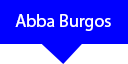
<style>
.page{position:relative;width:128px;height:64px;background:#0000ff}
.page>*{position:absolute;margin:0}
.t1{font:18px "MyriadPro-Regular";color:#ffffff}
</style>
<div class="page">
<p class="t1" style="left:15px;top:14px;width:96px;height:17px">Abba Burgos</p>
</div>
